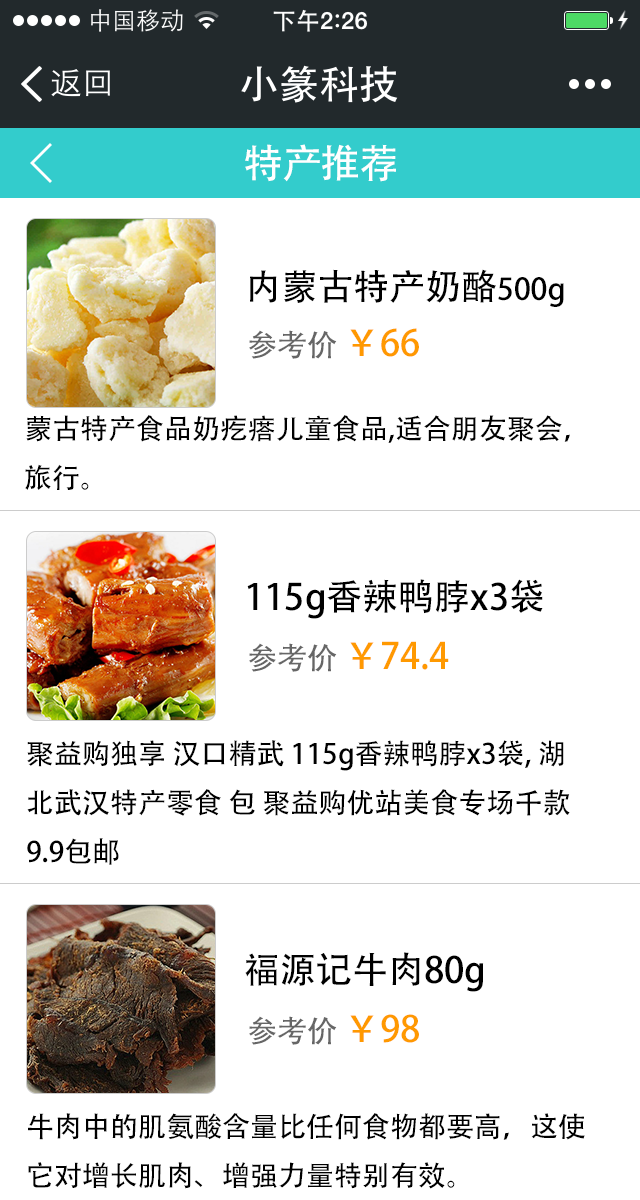
<style>
.page{position:relative;width:640px;height:1200px;background:#ffffff}
.page>*{position:absolute;margin:0}
.t1{font:40px "AdobeHeitiStd-Regular";color:#ffffff}
.t2{font:36px "AdobeHeitiStd-Regular";color:#000000}
.t3{font:30px "AdobeHeitiStd-Regular";color:#ff9900}
.t4{font:30px "AdobeHeitiStd-Regular";color:#666666}
.t5{font:36px "AdobeHeitiStd-Regular";color:#ff9900}
.t6{font:28px "AdobeHeitiStd-Regular";color:#000000}
</style>
<div class="page">
<p class="t1" style="left:245px;top:144px;width:151px;height:38px">特产推荐</p>
<p class="t2" style="left:250px;top:269px;width:314px;height:38px">内蒙古特产奶酪<span class="t3">500g</span></p>
<p class="t4" style="left:249px;top:328px;width:170px;height:31px">参考价 <span class="t5">￥66</span></p>
<p class="t6" style="left:25px;top:415px;width:545px;height:75px">蒙古特产食品奶疙瘩儿童食品,适合朋友聚会，<br>旅行。</p>
<p class="t2" style="left:247px;top:579px;width:296px;height:40px">115g香辣鸭脖x3袋</p>
<p class="t5" style="left:249px;top:641px;width:200px;height:31px"><span class="t4">参考价 </span>￥74.4</p>
<p class="t6" style="left:27px;top:740px;width:543px;height:125px">聚益购独享 汉口精武 115g香辣鸭脖x3袋, 湖<br>北武汉特产零食 包 聚益购优站美食专场千款<br>9.9包邮</p>
<p class="t2" style="left:245px;top:952px;width:239px;height:40px">福源记牛肉80g</p>
<p class="t4" style="left:249px;top:1014px;width:170px;height:31px">参考价 <span class="t5">￥98</span></p>
<p class="t6" style="left:28px;top:1113px;width:557px;height:76px">牛肉中的肌氨酸含量比任何食物都要高，这使<br>它对增长肌肉、增强力量特别有效。</p>
</div>
